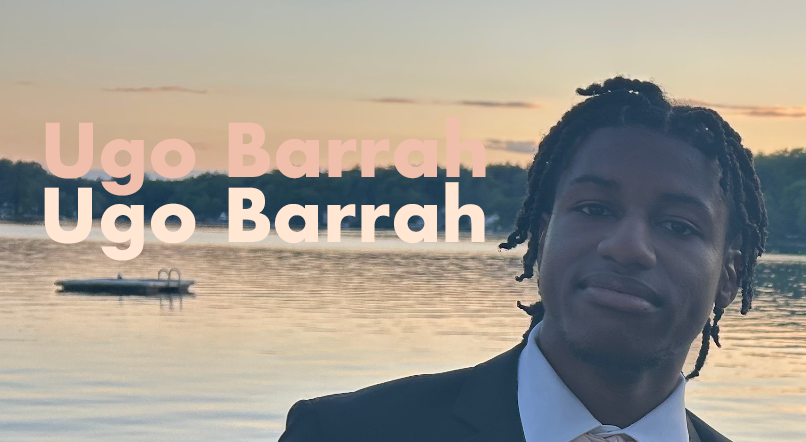
<style>
.page{position:relative;width:806px;height:442px}
.page>*{position:absolute;margin:0}
.t1{font:72px "Futura-Bold";color:#efbfab}
</style>
<div class="page">
<p class="t1" style="left:45px;top:117px;width:441px;height:79px">Ugo Barrah</p>
</div>
